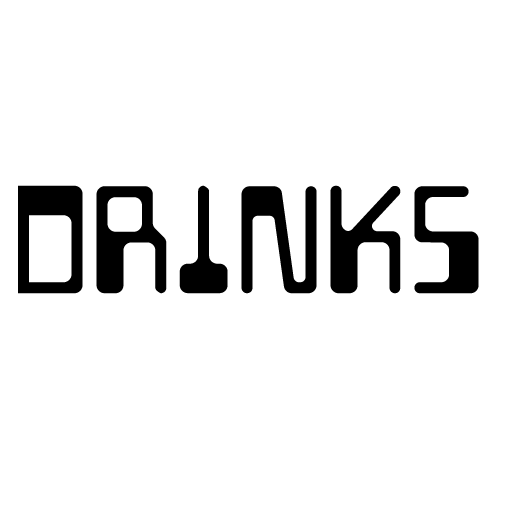
<style>
.page{position:relative;width:512px;height:512px;background:#ffffff}
.page>*{position:absolute;margin:0}
.t1{font:134.1px "BDGeminis";letter-spacing:0.04em;color:#000000}
</style>
<div class="page">
<p class="t1" style="left:18px;top:185px;width:461px;height:109px">DRINKS</p>
</div>
